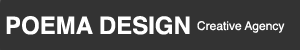
<style>
.page{position:relative;width:300px;height:50px;background:#333333}
.page>*{position:absolute;margin:0}
.t1{font:24px "Helvetica-Bold";color:#ffffff}
.t2{font:12px "Helvetica";color:#ffffff}
</style>
<div class="page">
<p class="t1" style="left:6px;top:16px;width:184px;height:19px">POEMA DESIGN</p>
<p class="t2" style="left:197px;top:21px;width:88px;height:12px">Creative Agency</p>
</div>
